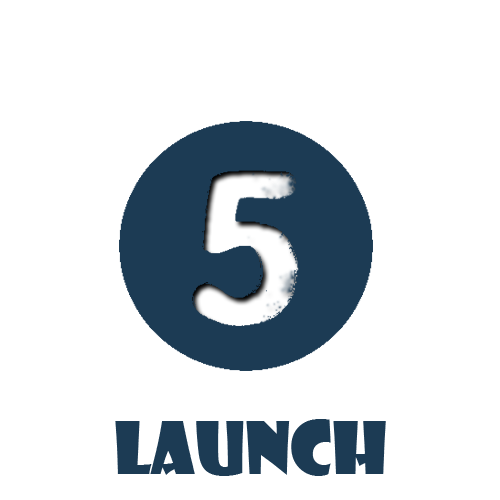
<style>
.page{position:relative;width:500px;height:500px;background:#ffffff}
.page>*{position:absolute;margin:0}
.t1{font:71px "ShowcardGothic-Reg";color:#1c3b54}
</style>
<div class="page">
<p class="t1" style="left:115px;top:419px;width:271px;height:57px">Launch</p>
</div>
